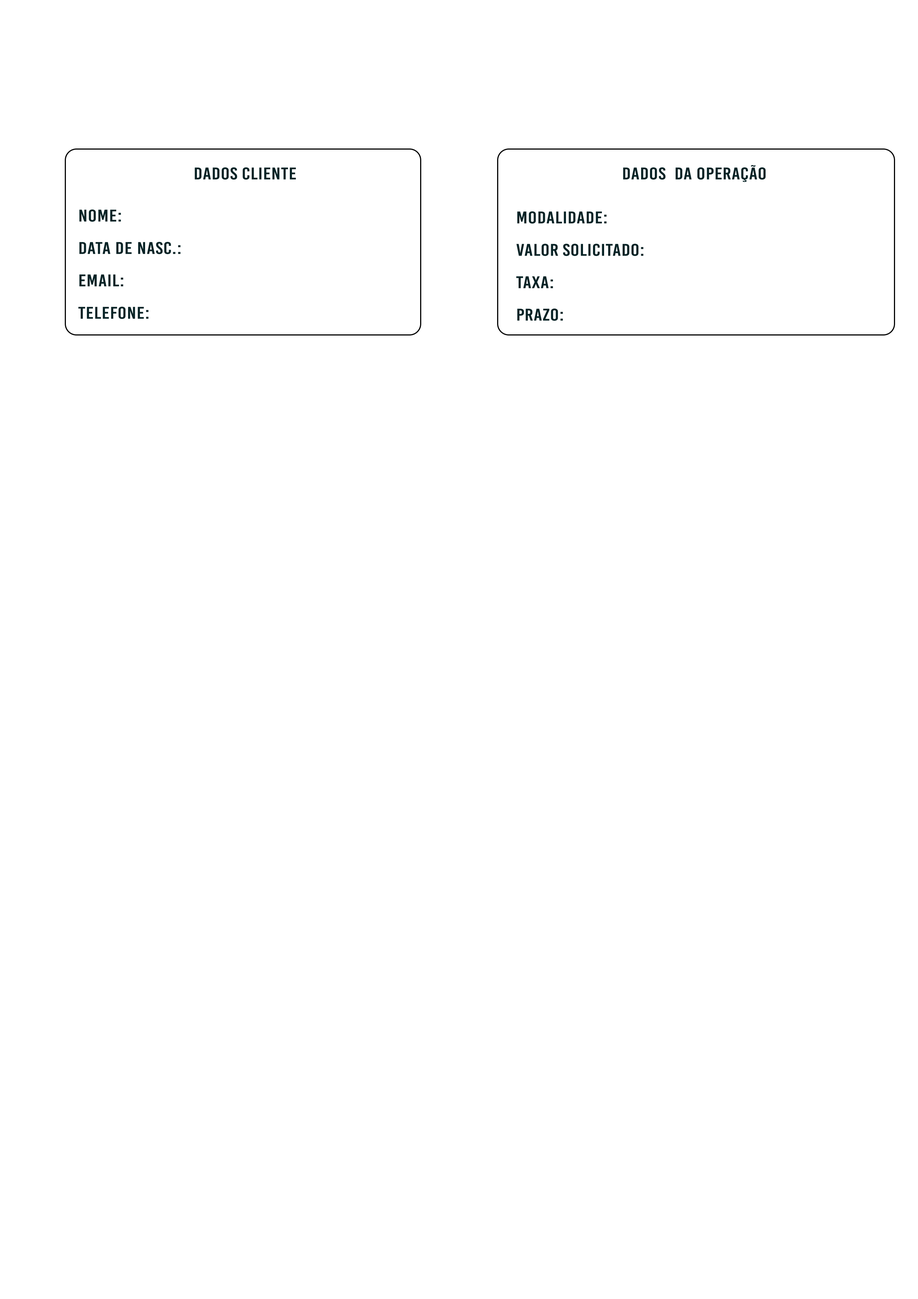
<style>
.page{position:relative;width:918px;height:1299px;background:#ffffff}
.page>*{position:absolute;margin:0}
.t1{font:17px "BebasKai";letter-spacing:0.02em;color:#082326;scale:1.2 1}
.t2{font:17px/32.4px "BebasKai";letter-spacing:0.02em;color:#082326;scale:1.2 1}
</style>
<div class="page">
<p class="t1" style="left:195px;top:167px;width:101px;height:13px">dados cliente</p>
<p class="t1" style="left:623px;top:165px;width:143px;height:17px">dados  da operação</p>
<p class="t2" style="left:78px;top:209px;width:103px;height:110px">Nome:<br>data de nasc.:<br>Email:<br>Telefone:</p>
<p class="t2" style="left:516px;top:211px;width:127px;height:110px">Modalidade:<br>valor solicitado:<br>taxa:<br>prazo:</p>
</div>
